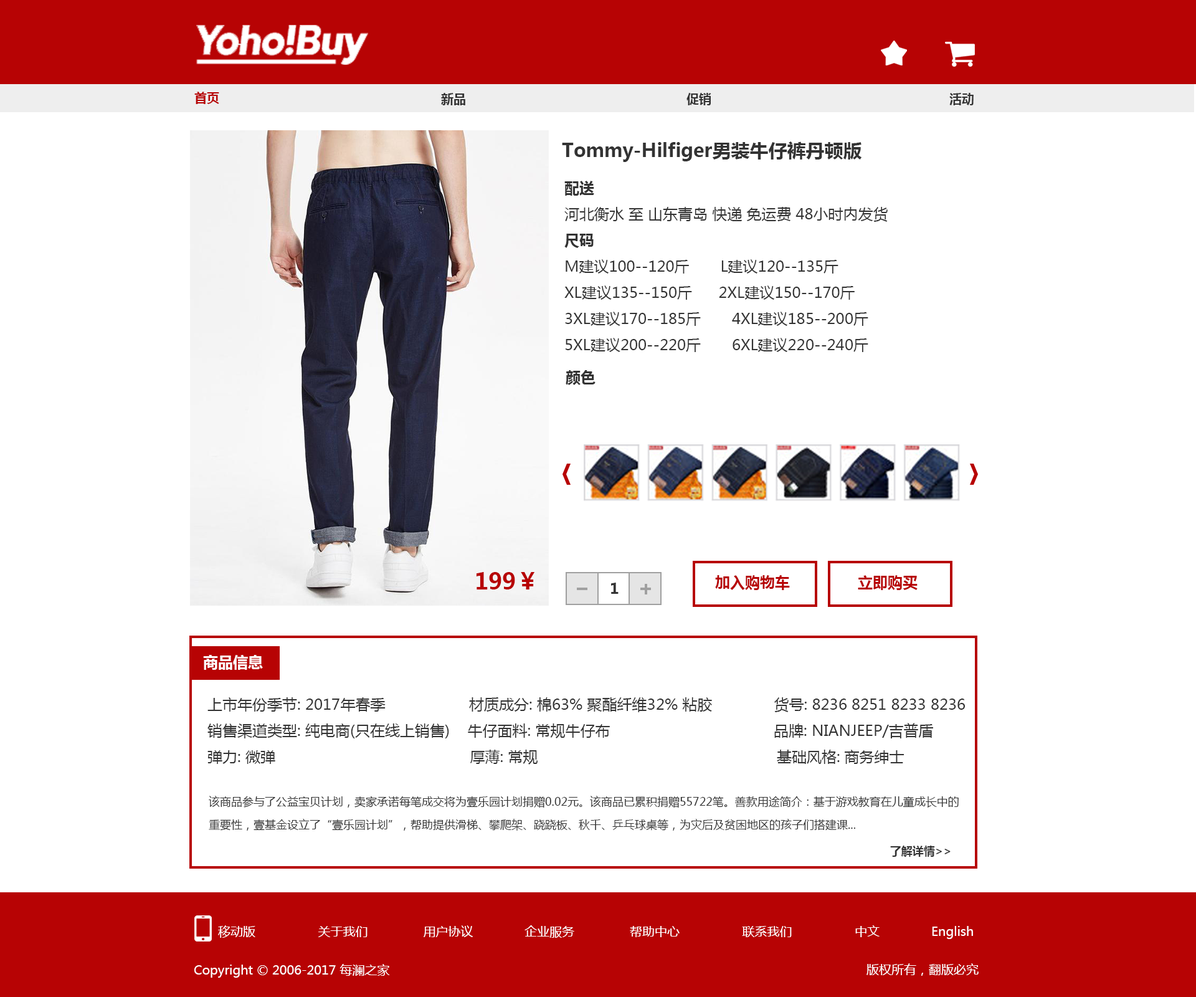
<style>
.page{position:relative;width:1196px;height:997px;background:#ffffff}
.page>*{position:absolute;margin:0}
.t1{font:12.5px "MicrosoftYaHei-Bold";color:#b70304}
.t2{font:12.5px "MicrosoftYaHei-Bold";color:#333333}
.t3{font:18.7px "MicrosoftYaHei-Bold";color:#333333}
.t4{font:15px "MicrosoftYaHei";color:#333333}
.t5{font:15px "MicrosoftYaHei-Bold";color:#333333}
.t6{font:22.4px "MicrosoftYaHei-Bold";color:#b70304}
.t7{font:15px "MicrosoftYaHei-Bold";color:#b70304}
.t8{font:15px "MicrosoftYaHei-Bold";color:#ffffff}
.t9{font:11.2px "MicrosoftYaHei";color:#333333}
.t10{font:11.2px "MicrosoftYaHei-Bold";color:#333333}
.t11{font:12.5px "MicrosoftYaHei";color:#ffffff}
</style>
<div class="page">
<p class="t1" style="left:194px;top:92px;width:25px;height:12px">首页</p>
<p class="t2" style="left:441px;top:93px;width:24px;height:12px">新品</p>
<p class="t2" style="left:687px;top:93px;width:24px;height:12px">促销</p>
<p class="t2" style="left:949px;top:93px;width:25px;height:12px">活动</p>
<p class="t3" style="left:562px;top:141px;width:300px;height:21px">Tommy-Hilfiger男装牛仔裤丹顿版</p>
<p class="t4" style="left:564px;top:181px;width:324px;height:171px"><span class="t5">配送<br></span>河北衡水 至 山东青岛 快递 免运费 48小时内发货<br><span class="t5">尺码<br></span>M建议100--120斤       L建议120--135斤<br>XL建议135--150斤      2XL建议150--170斤 <br>3XL建议170--185斤       4XL建议185--200斤 <br>5XL建议200--220斤       6XL建议220--240斤</p>
<p class="t5" style="left:566px;top:370px;width:30px;height:15px">颜色</p>
<p class="t6" style="left:477px;top:572px;width:58px;height:17px">199￥</p>
<p class="t7" style="left:715px;top:575px;width:75px;height:15px">加入购物车</p>
<p class="t7" style="left:858px;top:575px;width:60px;height:15px">立即购买</p>
<p class="t5" style="left:611px;top:583px;width:8px;height:11px">1</p>
<p class="t8" style="left:203px;top:655px;width:60px;height:15px">商品信息</p>
<p class="t4" style="left:207px;top:697px;width:758px;height:67px">上市年份季节: 2017年春季                   材质成分: 棉63% 聚酯纤维32% 粘胶              货号: 8236 8251 8233 8236            <br> 销售渠道类型: 纯电商(只在线上销售)    牛仔面料: 常规牛仔布                                     品牌: NIANJEEP/吉普盾<br> 弹力: 微弹                                            厚薄: 常规                                                      基础风格: 商务绅士</p>
<p class="t9" style="left:209px;top:796px;width:750px;height:61px">该商品参与了公益宝贝计划，卖家承诺每笔成交将为壹乐园计划捐赠0.02元。该商品已累积捐赠55722笔。善款用途简介：基于游戏教育在儿童成长中的<br>重要性，壹基金设立了“壹乐园计划”，帮助提供滑梯、攀爬架、跷跷板、秋千、乒乓球桌等，为灾后及贫困地区的孩子们搭建课...    <br>                                                                                                                                                          <span class="t10">了解详情&gt;&gt;</span></p>
<p class="t11" style="left:218px;top:925px;width:755px;height:14px">移动版                 关于我们               用户协议              企业服务               帮助中心                 联系我们                 中文              English</p>
<p class="t11" style="left:194px;top:964px;width:196px;height:14px">Copyright © 2006-2017 每澜之家</p>
<p class="t11" style="left:867px;top:963px;width:112px;height:13px">版权所有，翻版必究</p>
</div>
